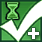
<style>
.page{position:relative;width:42px;height:42px;background:#ffffff}
.page>*{position:absolute;margin:0}
.t1{font:24px "Arial-BoldMT";color:#ffffff}
</style>
<div class="page">
<p class="t1" style="left:28px;top:28px;width:11px;height:11px">+</p>
</div>
